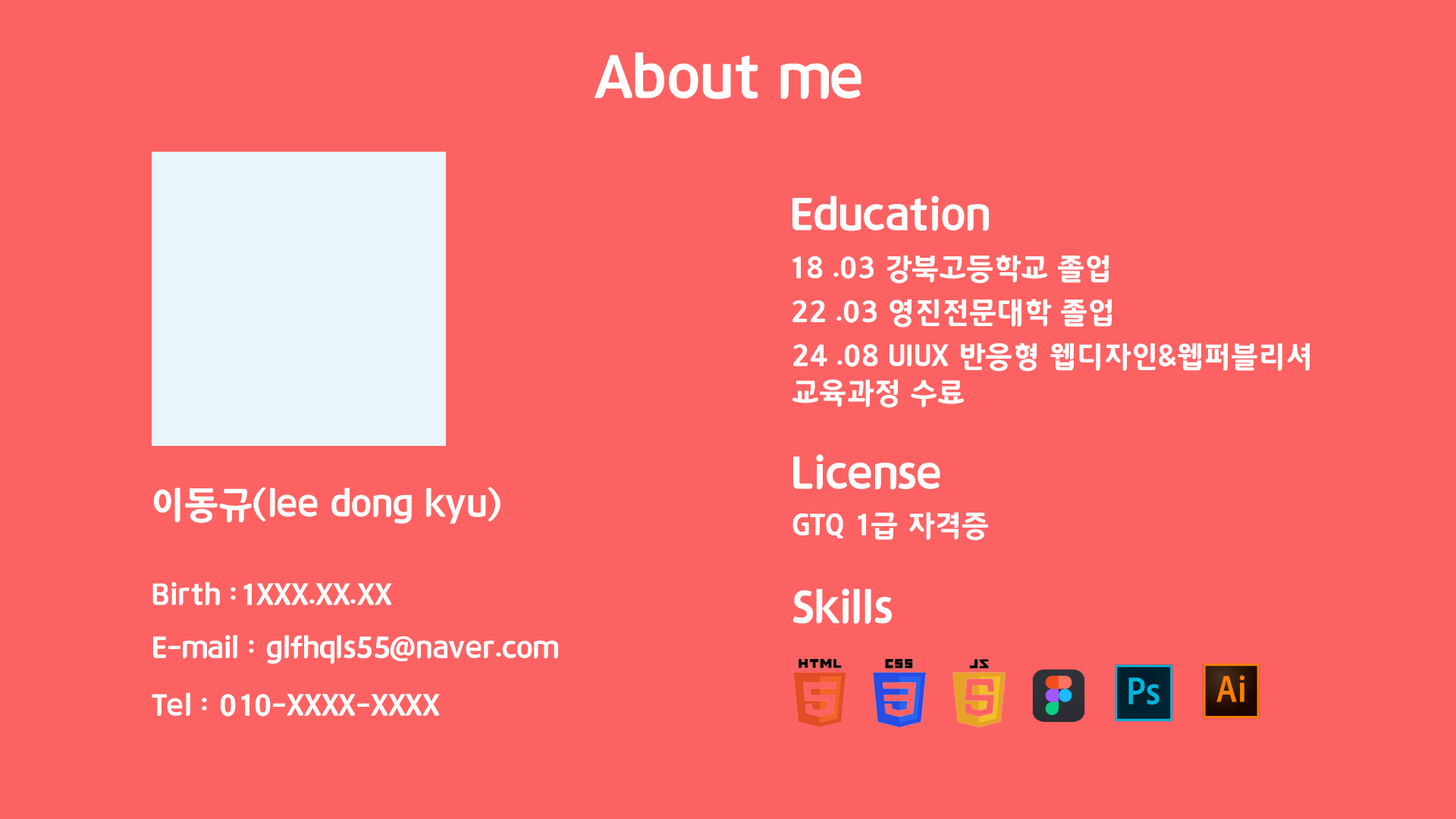
<style>
.page{position:relative;width:1456px;height:819px;background:#fd6262}
.page>*{position:absolute;margin:0}
.t1{font:60.7px "12LotteMartHappyBold";color:#ffffff}
.t2{font:45.5px "12LotteMartHappyBold";color:#ffffff}
.t3{font:30.3px "12LotteMartHappyBold";color:#ffffff}
.t4{font:37.9px "12LotteMartHappyBold";color:#ffffff}
</style>
<div class="page">
<p class="t1" style="left:595px;top:52px;width:266px;height:47px">About me</p>
<p class="t2" style="left:792px;top:196px;width:197px;height:35px">Education</p>
<p class="t3" style="left:792px;top:255px;width:317px;height:29px">18 .03 강북고등학교 졸업</p>
<p class="t3" style="left:792px;top:299px;width:320px;height:29px">22 .03 영진전문대학 졸업</p>
<p class="t3" style="left:792px;top:343px;width:518px;height:65px">24 .08 UIUX 반응형 웹디자인&amp;웹퍼블리셔<br>교육과정 수료</p>
<p class="t2" style="left:793px;top:454px;width:147px;height:36px">License</p>
<p class="t4" style="left:154px;top:487px;width:346px;height:37px">이동규(lee dong kyu)</p>
<p class="t3" style="left:792px;top:512px;width:196px;height:29px">GTQ 1급 자격증</p>
<p class="t3" style="left:152px;top:582px;width:240px;height:23px">Birth :1XXX.XX.XX</p>
<p class="t2" style="left:792px;top:588px;width:100px;height:36px">Skills</p>
<p class="t3" style="left:153px;top:635px;width:405px;height:29px">E-mail : glfhqls55@naver.com</p>
<p class="t3" style="left:152px;top:692px;width:288px;height:25px">Tel : 010-XXXX-XXXX</p>
</div>
